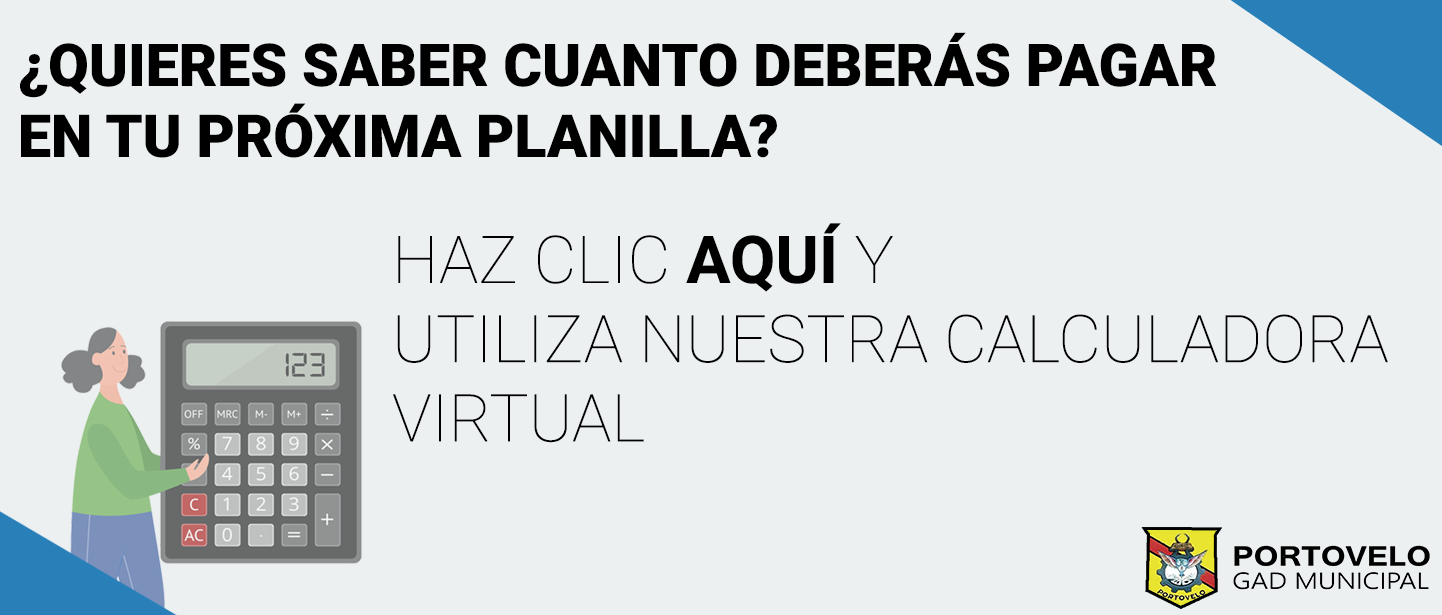
<style>
.page{position:relative;width:1442px;height:615px;background:#ecf0f1}
.page>*{position:absolute;margin:0}
.t1{font:59px "Roboto-Black";color:#000000}
.t2{font:66px "Roboto-Thin";color:#000000}
.t3{font:66px "Roboto-Bold";color:#000000}
</style>
<div class="page">
<p class="t1" style="left:20px;top:32px;width:1196px;height:126px">¿QUIERES SABER CUANTO DEBERÁS PAGAR <br>EN TU PRÓXIMA PLANILLA?</p>
<p class="t2" style="left:393px;top:223px;width:995px;height:220px">HAZ CLIC <span class="t3">AQUÍ </span>Y <br>UTILIZA NUESTRA CALCULADORA<br>VIRTUAL</p>
</div>
